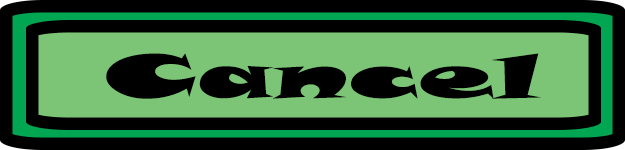
<style>
.page{position:relative;width:625px;height:150px;background:#000000}
.page>*{position:absolute;margin:0}
.t1{font:60px "SnapITC-Regular";color:#000000;scale:2 1}
</style>
<div class="page">
<p class="t1" style="left:106px;top:53px;width:435px;height:46px">Cancel</p>
</div>
